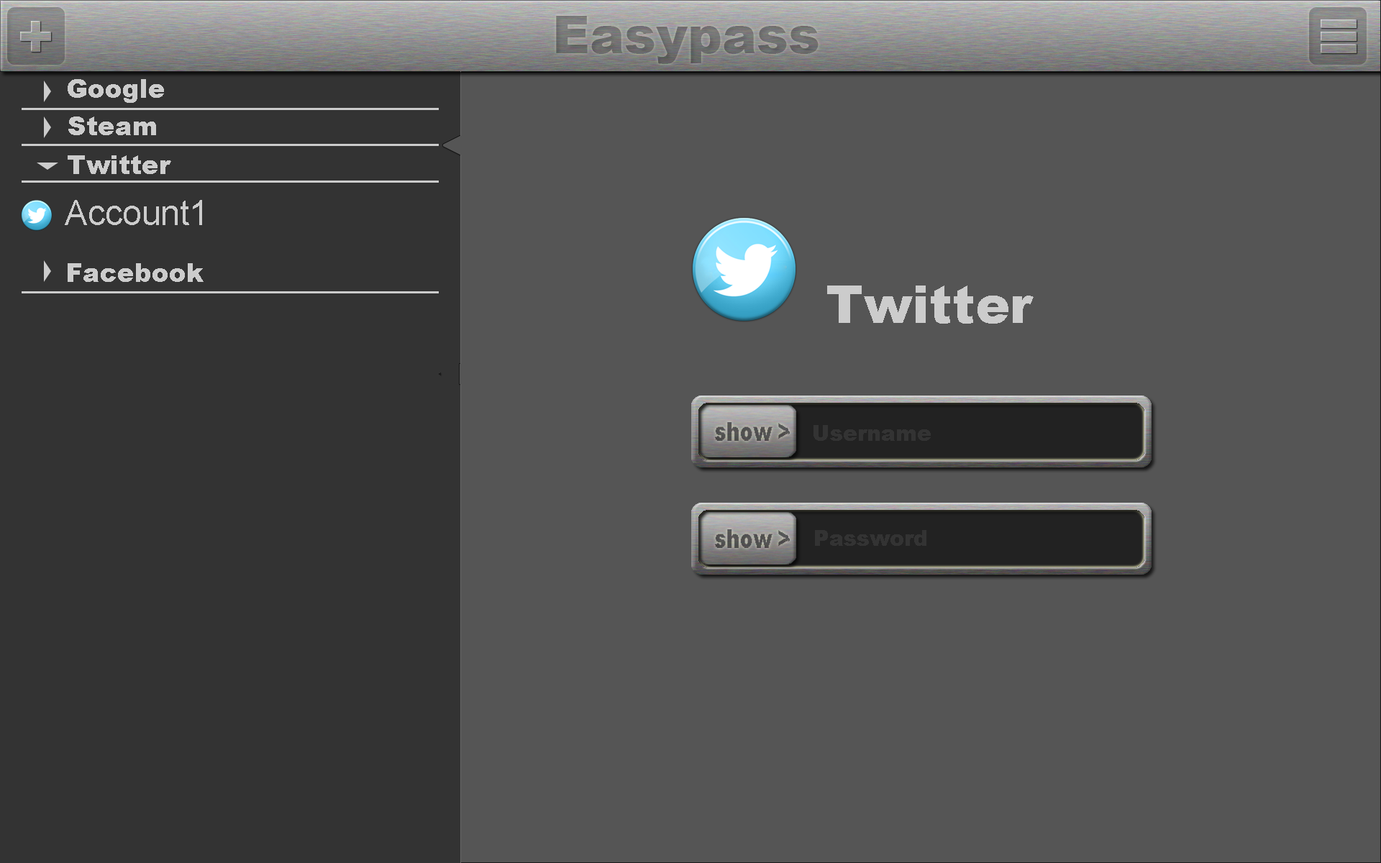
<style>
.page{position:relative;width:1381px;height:863px;background:#555555}
.page>*{position:absolute;margin:0}
.t1{font:25.9px "Arial-Black";color:#cccccc}
.t2{font:34.5px "ArialMT";color:#cccccc}
.t3{font:51.8px "Arial-Black";color:#cccccc}
.t4{font:21.6px "Arial-Black";color:#333333}
</style>
<div class="page">
<p class="t1" style="left:68px;top:155px;width:103px;height:19px">Twitter</p>
<p class="t2" style="left:65px;top:200px;width:137px;height:25px">Account1</p>
<p class="t1" style="left:68px;top:263px;width:136px;height:19px">Facebook</p>
<p class="t3" style="left:827px;top:286px;width:207px;height:38px">Twitter</p>
<p class="t4" style="left:814px;top:425px;width:117px;height:16px">Username</p>
<p class="t4" style="left:815px;top:530px;width:112px;height:16px">Password</p>
</div>
